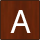
<style>
.page{position:relative;width:40px;height:40px}
.page>*{position:absolute;margin:0}
.t1{font:32px "Helvetica";letter-spacing:0.02em;color:#ffffff}
</style>
<div class="page">
<p class="t1" style="left:10px;top:10px;width:21px;height:23px">A</p>
</div>
